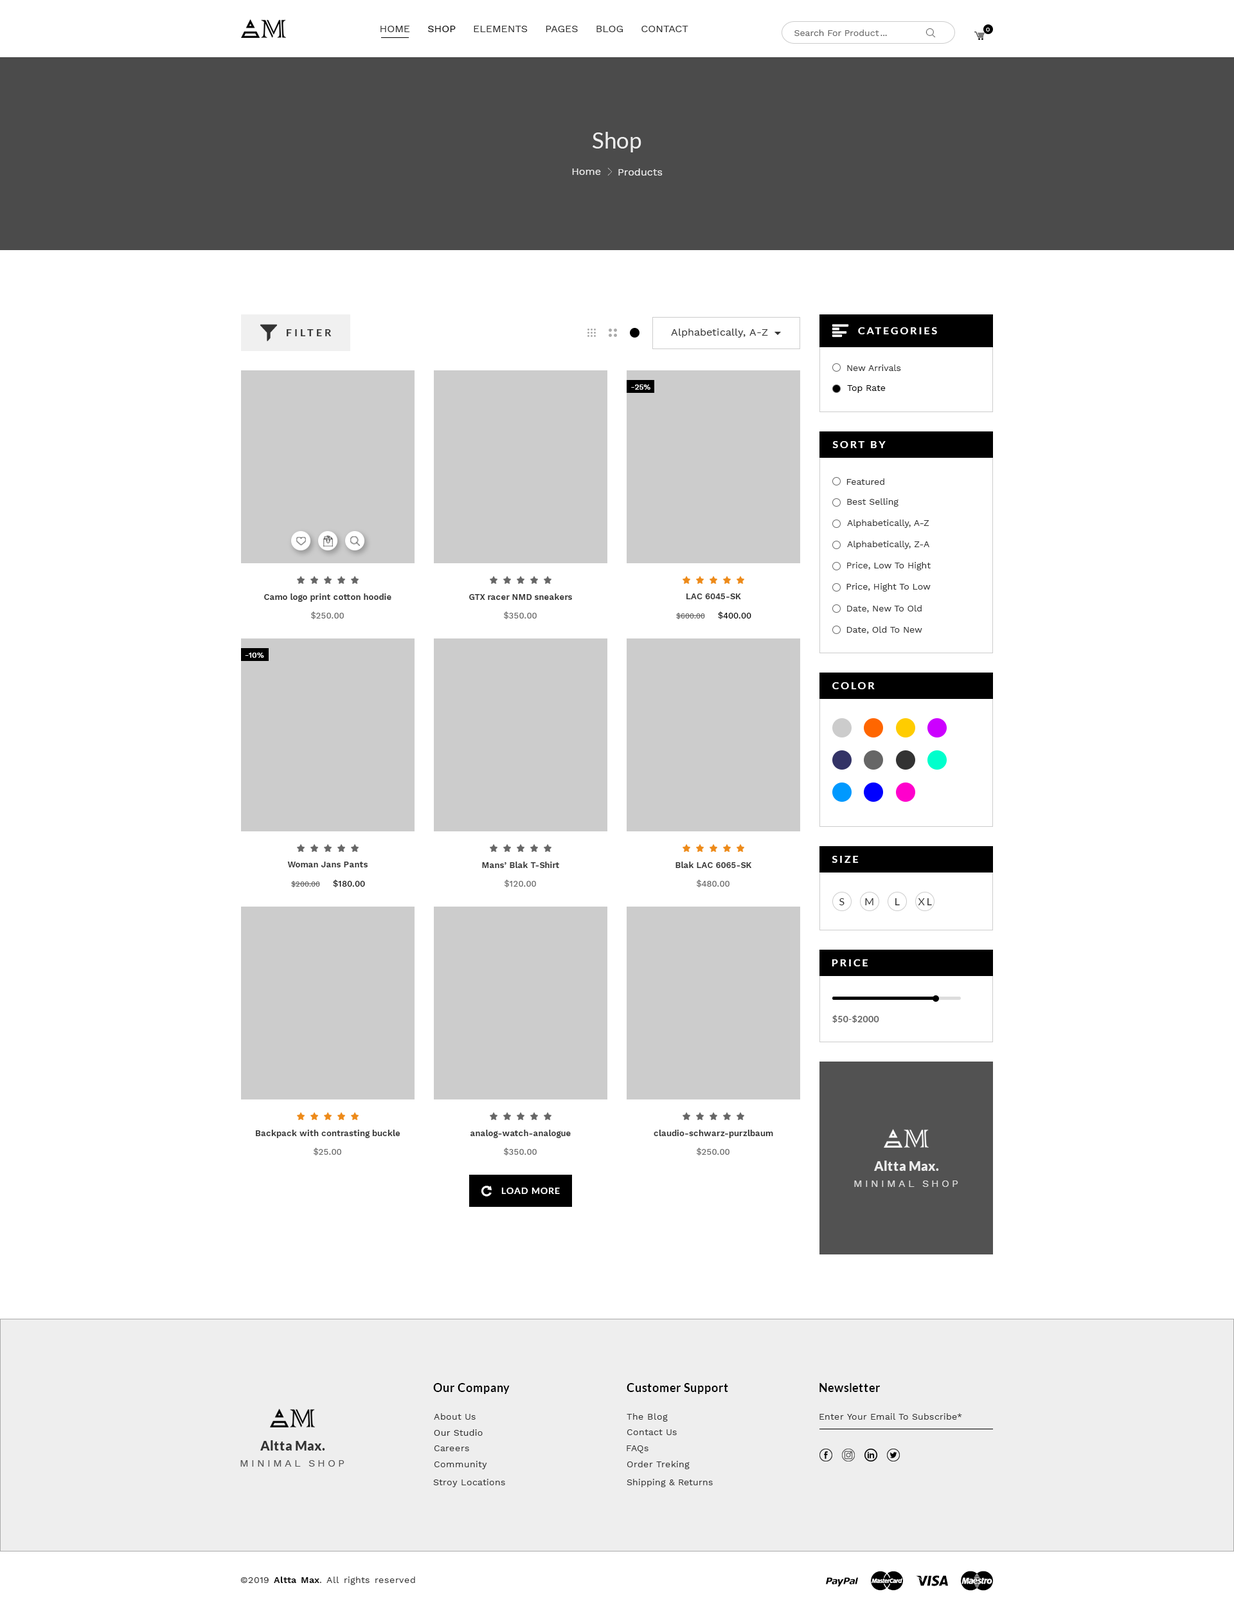
<style>
.page{position:relative;width:1234px;height:1610px;background:#ffffff}
.page>*{position:absolute;margin:0}
.t1{font:10.3px "WorkSans-Regular";color:#333333}
.t2{font:10.3px "WorkSans-Regular";color:#000000}
.t3{font:9px "WorkSans-Regular";color:#666666}
.t4{font:6.4px "WorkSans-Regular";color:#ffffff}
.t5{font:22.5px "Lato-Regular";color:#eeeeee}
.t6{font:10.3px "WorkSans-Regular";color:#eeeeee}
.t7{font:10.3px "Lato-Bold";letter-spacing:0.25em;color:#333333}
.t8{font:10.3px "WorkSans-Regular";letter-spacing:0.025em;color:#333333}
.t9{font:10.3px "Lato-Bold";letter-spacing:0.18em;color:#ffffff}
.t10{font:9px "WorkSans-Regular";color:#333333}
.t11{font:7.7px "WorkSans-Medium";letter-spacing:0.01em;color:#ffffff}
.t12{font:9px "WorkSans-Regular";color:#010101}
.t13{font:8.4px "WorkSans-SemiBold";letter-spacing:0.01em;color:#333333}
.t14{font:8.4px "WorkSans-Medium";letter-spacing:0.01em;color:#666666}
.t15{font:7.1px "WorkSans-Medium";letter-spacing:0.01em;color:#666666}
.t16{font:8.4px "WorkSans-Medium";letter-spacing:0.01em;color:#010101}
.t17{font:8.4px "WorkSans-Medium";letter-spacing:0.01em;color:#000000}
.t18{font:10.3px "Lato-Regular";letter-spacing:0.18em;color:#333333}
.t19{font:9px "Lato-Bold";letter-spacing:0.025em;color:#5f5f5f}
.t20{font:12.9px "Lato-Black";letter-spacing:0.03em;color:#eeeeee}
.t21{font:10.3px "WorkSans-Regular";letter-spacing:0.25em;color:#dddddd}
.t22{font:9px "Lato-Bold";letter-spacing:0.08em;color:#ffffff}
.t23{font:11.6px "Lato-Bold";letter-spacing:0.03em;color:#000000}
.t24{font:9px "WorkSans-Regular";letter-spacing:0.03em;color:#333333}
.t25{font:12.9px "Lato-Black";letter-spacing:0.03em;color:#333333}
.t26{font:10.3px "WorkSans-Regular";letter-spacing:0.25em;color:#555555}
.t27{font:9px "WorkSans-SemiBold";letter-spacing:0.03em;color:#000000}
</style>
<div class="page">
<p class="t1" style="left:381px;top:26px;width:307px;height:6px">HOME     <span class="t2">SHOP</span>     ELEMENTS     PAGES     BLOG     CONTACT</p>
<p class="t3" style="left:795px;top:30px;width:84px;height:6px">Search For Product</p>
<p class="t4" style="left:986px;top:28px;width:4px;height:4px">0</p>
<p class="t3" style="left:881px;top:35px;width:6px;height:1px">...</p>
<p class="t5" style="left:593px;top:132px;width:49px;height:20px">Shop</p>
<p class="t6" style="left:572px;top:168px;width:29px;height:7px">Home</p>
<p class="t6" style="left:618px;top:168px;width:45px;height:8px">Products</p>
<p class="t7" style="left:287px;top:329px;width:45px;height:7px">FILTER</p>
<p class="t8" style="left:671px;top:328px;width:97px;height:10px">Alphabetically, A-Z</p>
<p class="t9" style="left:858px;top:327px;width:79px;height:7px">CATEGORIES</p>
<p class="t10" style="left:847px;top:364px;width:54px;height:7px">New Arrivals</p>
<p class="t11" style="left:631px;top:384px;width:20px;height:6px">-25%</p>
<p class="t12" style="left:847px;top:385px;width:39px;height:8px">Top Rate</p>
<p class="t9" style="left:833px;top:441px;width:53px;height:7px">SORT BY</p>
<p class="t10" style="left:847px;top:478px;width:38px;height:7px">Featured</p>
<p class="t10" style="left:847px;top:498px;width:52px;height:9px">Best Selling</p>
<p class="t10" style="left:847px;top:519px;width:83px;height:9px">Alphabetically, A-Z</p>
<p class="t10" style="left:847px;top:541px;width:83px;height:8px">Alphabetically, Z-A</p>
<p class="t10" style="left:847px;top:562px;width:84px;height:8px">Price, Low To Hight</p>
<p class="t13" style="left:264px;top:593px;width:128px;height:9px">Camo logo print cotton hoodie</p>
<p class="t13" style="left:469px;top:593px;width:103px;height:7px">GTX racer NMD sneakers</p>
<p class="t13" style="left:687px;top:593px;width:54px;height:6px">LAC 6045-SK</p>
<p class="t10" style="left:847px;top:583px;width:84px;height:8px">Price, Hight To Low</p>
<p class="t10" style="left:847px;top:605px;width:75px;height:8px">Date, New To Old</p>
<p class="t14" style="left:311px;top:611px;width:33px;height:8px">$250.00</p>
<p class="t14" style="left:504px;top:611px;width:33px;height:8px">$350.00</p>
<p class="t15" style="left:676px;top:611px;width:76px;height:8px">$600.00     <span class="t16">$400.00</span></p>
<p class="t10" style="left:847px;top:626px;width:76px;height:8px">Date, Old To New</p>
<p class="t11" style="left:245px;top:652px;width:19px;height:6px">-10%</p>
<p class="t9" style="left:833px;top:682px;width:42px;height:7px">COLOR</p>
<p class="t9" style="left:832px;top:856px;width:27px;height:7px">SIZE</p>
<p class="t13" style="left:287px;top:861px;width:81px;height:6px">Woman Jans Pants</p>
<p class="t13" style="left:482px;top:861px;width:77px;height:7px">Mans’ Blak T-Shirt</p>
<p class="t13" style="left:676px;top:861px;width:76px;height:7px">Blak LAC 6065-SK</p>
<p class="t15" style="left:291px;top:879px;width:74px;height:8px">$200.00     <span class="t17">$180.00</span></p>
<p class="t14" style="left:505px;top:879px;width:31px;height:8px">$120.00</p>
<p class="t14" style="left:697px;top:879px;width:33px;height:8px">$480.00</p>
<p class="t18" style="left:840px;top:898px;width:5px;height:7px">S</p>
<p class="t18" style="left:865px;top:898px;width:9px;height:7px">M</p>
<p class="t18" style="left:896px;top:898px;width:4px;height:7px">L</p>
<p class="t18" style="left:918px;top:898px;width:14px;height:7px">XL</p>
<p class="t9" style="left:832px;top:959px;width:37px;height:7px">PRICE</p>
<p class="t19" style="left:833px;top:1014px;width:46px;height:9px">$50-$2000</p>
<p class="t13" style="left:256px;top:1130px;width:145px;height:8px">Backpack with contrasting buckle</p>
<p class="t13" style="left:471px;top:1130px;width:100px;height:8px">analog-watch-analogue</p>
<p class="t13" style="left:654px;top:1130px;width:119px;height:8px">claudio-schwarz-purzlbaum</p>
<p class="t14" style="left:314px;top:1148px;width:27px;height:7px">$25.00</p>
<p class="t14" style="left:504px;top:1148px;width:33px;height:7px">$350.00</p>
<p class="t14" style="left:697px;top:1148px;width:33px;height:7px">$250.00</p>
<p class="t20" style="left:874px;top:1160px;width:65px;height:11px">Altta Max.</p>
<p class="t21" style="left:854px;top:1180px;width:105px;height:7px">MINIMAL SHOP</p>
<p class="t22" style="left:501px;top:1187px;width:59px;height:7px">LOAD MORE</p>
<p class="t23" style="left:433px;top:1383px;width:77px;height:11px">Our Company</p>
<p class="t23" style="left:627px;top:1383px;width:101px;height:11px">Customer Support</p>
<p class="t23" style="left:820px;top:1383px;width:60px;height:9px">Newsletter</p>
<p class="t24" style="left:434px;top:1413px;width:42px;height:6px">About Us</p>
<p class="t24" style="left:627px;top:1413px;width:41px;height:8px">The Blog</p>
<p class="t24" style="left:820px;top:1413px;width:142px;height:6px">Enter Your Email To Subscribe*</p>
<p class="t24" style="left:434px;top:1429px;width:49px;height:7px">Our Studio</p>
<p class="t24" style="left:627px;top:1429px;width:50px;height:6px">Contact Us</p>
<p class="t25" style="left:260px;top:1440px;width:65px;height:10px">Altta Max.</p>
<p class="t24" style="left:434px;top:1445px;width:35px;height:6px">Careers</p>
<p class="t24" style="left:627px;top:1445px;width:22px;height:8px">FAQs</p>
<p class="t26" style="left:240px;top:1460px;width:105px;height:6px">MINIMAL SHOP</p>
<p class="t24" style="left:434px;top:1461px;width:53px;height:8px">Community</p>
<p class="t24" style="left:627px;top:1461px;width:63px;height:8px">Order Treking</p>
<p class="t24" style="left:433px;top:1479px;width:72px;height:8px">Stroy Locations</p>
<p class="t24" style="left:627px;top:1479px;width:86px;height:8px">Shipping &amp; Returns</p>
<p class="t24" style="left:240px;top:1576px;width:175px;height:9px">©2019 <span class="t27">Altta Max</span>. All rights reserved</p>
</div>
